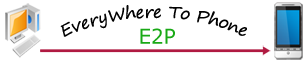
<style>
.page{position:relative;width:306px;height:61px;background:#ffffff}
.page>*{position:absolute;margin:0}
.t1{font:16.4px "SegoePrint";color:#020202;scale:0.96 1}
.t2{font:20.6px "MSReferenceSansSerif";color:#19a916;scale:0.96 1}
</style>
<div class="page">
<p class="t1" style="left:60px;top:5px;width:187px;height:32px">EveryWhere To Phone</p>
<p class="t2" style="left:140px;top:28px;width:35px;height:16px">E2P</p>
</div>
